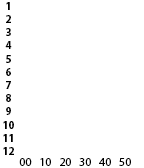
<style>
.page{position:relative;width:144px;height:168px;background:#ffffff}
.page>*{position:absolute;margin:0}
.t1{font:11px "MyriadPro-Bold";color:#000000}
.t2{font:12px "MyriadPro-Regular";color:#000000}
</style>
<div class="page">
<p class="t1" style="left:3px;top:2px;width:11px;height:153px;text-align:center">1<br>2<br>3<br>4<br>5<br>6<br>7<br>8<br>9<br>10<br>11<br>12</p>
<p class="t2" style="left:19px;top:158px;width:112px;height:8px">00   10   20   30   40   50</p>
</div>
